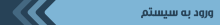
<style>
.page{position:relative;width:220px;height:25px;background:#7eb5d6}
.page>*{position:absolute;margin:0}
.t1{font:12px "Mj_Flow-Bold";color:#274257}
</style>
<div class="page">
<p class="t1" style="left:141px;top:7px;width:73px;height:12px">ورود به سیستم</p>
</div>
